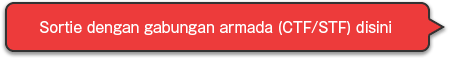
<style>
.page{position:relative;width:450px;height:58px;background:#ed3b3b}
.page>*{position:absolute;margin:0}
.t1{font:14px "GothicMB101Pro-Regular";color:#ffffff}
</style>
<div class="page">
<p class="t1" style="left:40px;top:21px;width:351px;height:14px">Sortie dengan gabungan armada (CTF/STF) disini</p>
</div>
